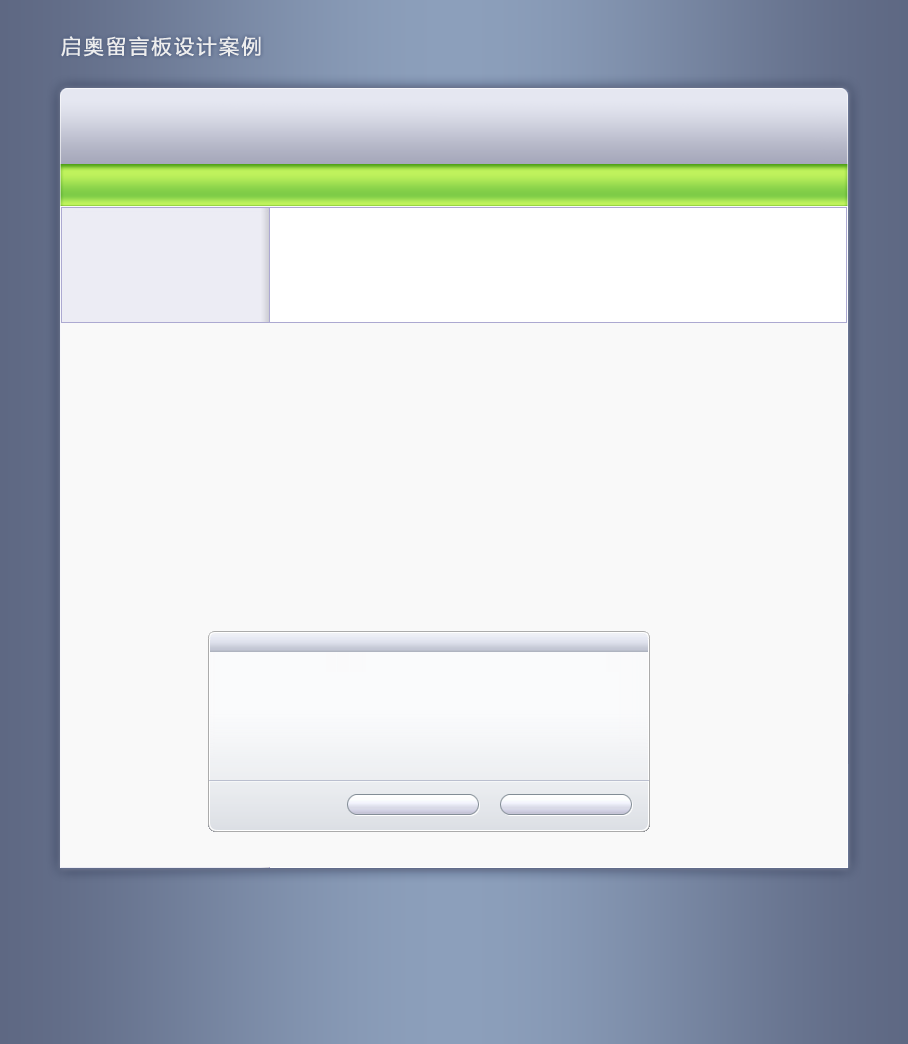
<style>
.page{position:relative;width:908px;height:1044px;background:#f9f9f9}
.page>*{position:absolute;margin:0}
.t1{font:20px "MicrosoftYaHei";letter-spacing:0.1em;color:#ededed;font-weight:bold}
</style>
<div class="page">
<p class="t1" style="left:61px;top:36px;width:200px;height:21px">启奥留言板设计案例</p>
</div>
